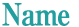
<style>
.page{position:relative;width:79px;height:27px;background:#ffffff}
.page>*{position:absolute;margin:0}
.t1{font:30px "RyuminPro-ExBold";letter-spacing:-0.08em;color:#239e9f;font-weight:bold;scale:0.9 1}
</style>
<div class="page">
<p class="t1" style="left:2px;top:3px;width:68px;height:23px">Name</p>
</div>
